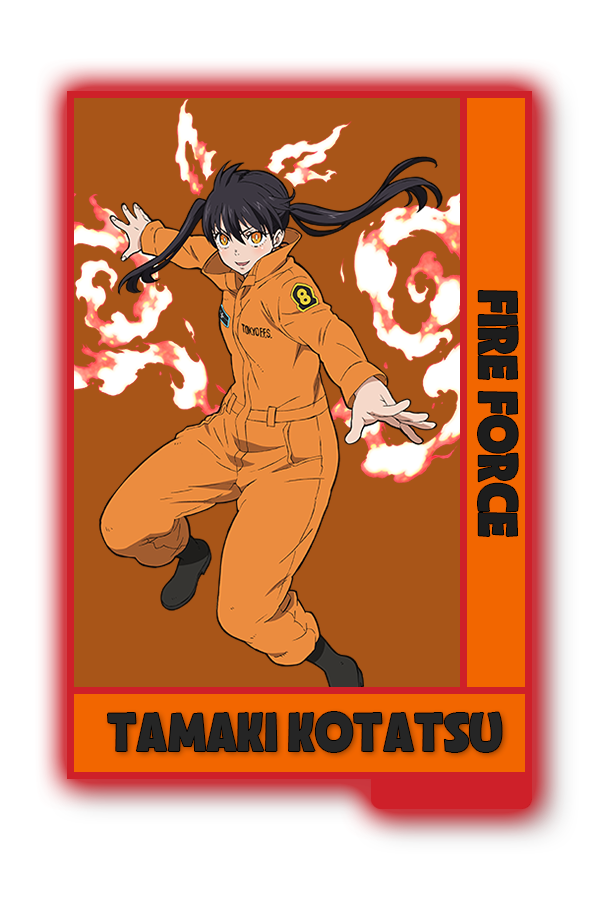
<style>
.page{position:relative;width:600px;height:900px;background:#ffffff}
.page>*{position:absolute;margin:0}
.t1{font:69.6px "AristonComicDemo-Regular";color:#1d1d1d}
.t2{font:69.1px "AristonComicDemo-Regular";color:#252525}
</style>
<div class="page">
<p class="t1" style="left:478px;top:291px;width:40px;height:245px;rotate:90deg">FIRE FORCE</p>
<p class="t2" style="left:108px;top:712px;width:394px;height:40px">TAMAKI KOTATSU</p>
</div>
